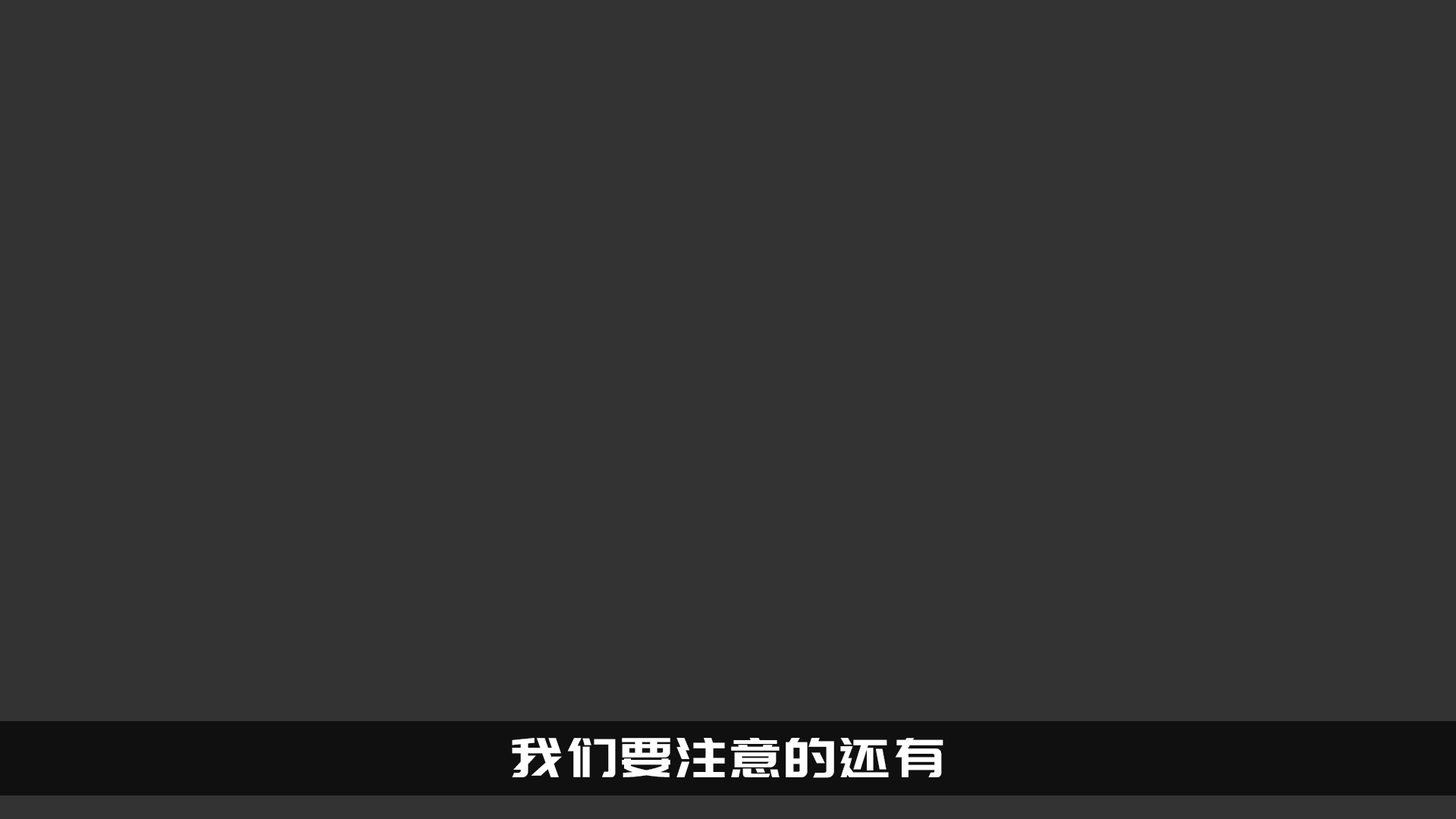
<style>
.page{position:relative;width:1456px;height:819px;background:#333333}
.page>*{position:absolute;margin:0}
.t1{font:54.6px "PangMenZhengDao-3";color:#ffffff}
</style>
<div class="page">
<p class="t1" style="left:512px;top:738px;width:431px;height:40px">我们要注意的还有</p>
</div>
